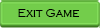
<style>
.page{position:relative;width:100px;height:28px;background:#73cd4b}
.page>*{position:absolute;margin:0}
.t1{font:12px "CopperplateGothic-Light";color:#000000}
</style>
<div class="page">
<p class="t1" style="left:18px;top:9px;width:61px;height:8px">Exit Game</p>
</div>
